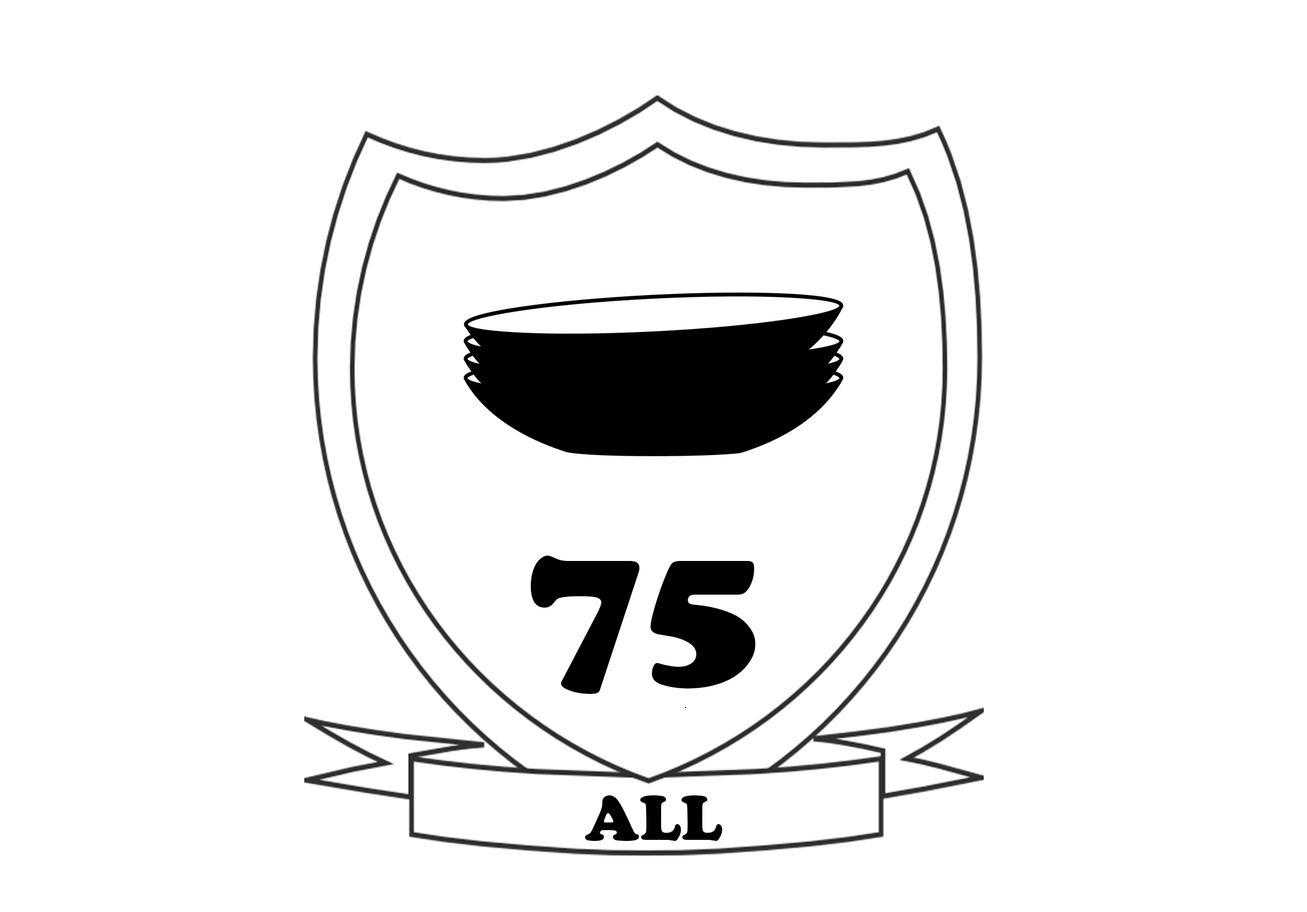
<style>
.page{position:relative;width:1307px;height:912px;background:#ffffff}
.page>*{position:absolute;margin:0}
.t1{font:195.3px "CooperBlack";color:#000000}
.t2{font:65.1px "CooperBlack";color:#000000}
</style>
<div class="page">
<p class="t1" style="left:531px;top:556px;width:225px;height:138px">75</p>
<p class="t2" style="left:585px;top:795px;width:138px;height:46px">ALL</p>
</div>
